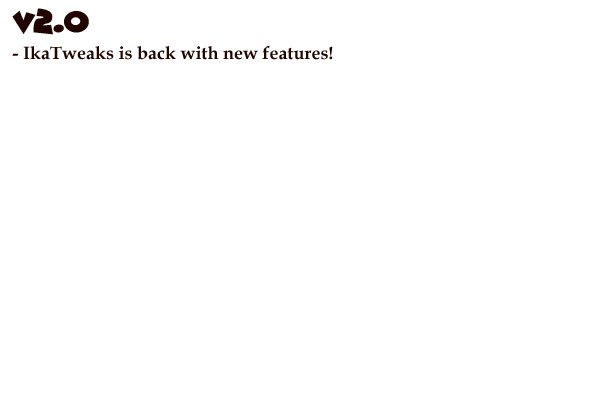
<style>
.page{position:relative;width:600px;height:400px;background:#ffffff}
.page>*{position:absolute;margin:0}
.t1{font:30px "ComicQueens";color:#200500}
.t2{font:18px "BookAntiqua-Bold";color:#200500}
</style>
<div class="page">
<p class="t1" style="left:12px;top:8px;width:77px;height:27px">v2.0</p>
<p class="t2" style="left:12px;top:46px;width:321px;height:14px">- IkaTweaks is back with new features!</p>
</div>
